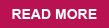
<style>
.page{position:relative;width:109px;height:28px;background:#b81252}
.page>*{position:absolute;margin:0}
.t1{font:14px "Arial-BoldMT";color:#ffffff}
</style>
<div class="page">
<p class="t1" style="left:12px;top:9px;width:85px;height:10px">READ MORE</p>
</div>
